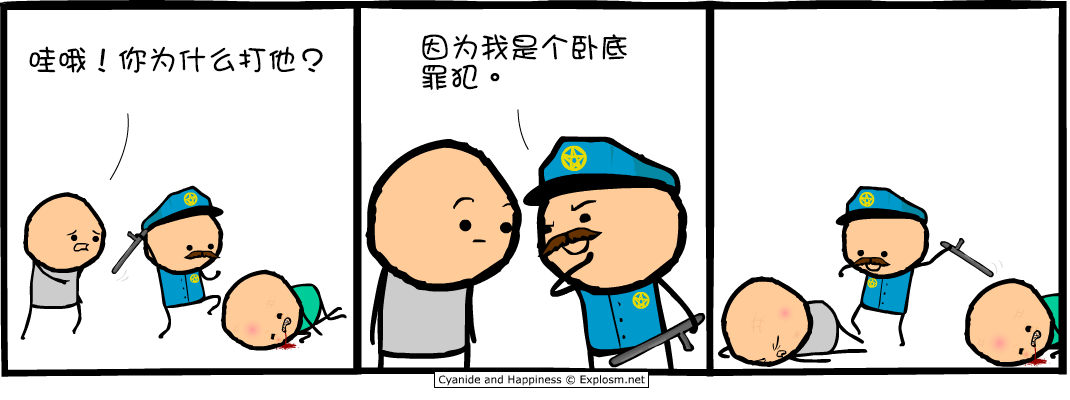
<style>
.page{position:relative;width:1070px;height:400px;background:#ffffff}
.page>*{position:absolute;margin:0}
.t1{font:30px/30px "DFGirl";color:#000000}
.t2{font:30px "DFGirl";color:#000000}
</style>
<div class="page">
<p class="t1" style="left:422px;top:34px;width:205px;height:56px">因为我是个卧底<br>罪犯。</p>
<p class="t2" style="left:29px;top:46px;width:294px;height:27px">哇哦！你为什么打他？</p>
</div>
